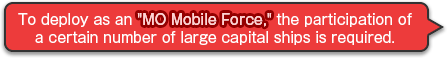
<style>
.page{position:relative;width:448px;height:58px;background:#ed3b3b}
.page>*{position:absolute;margin:0}
.t1{font:14px/18px "GothicMB101Pro-Regular";color:#ffffff}
.t2{font:14px/18px "GothicMB101Pro-Regular";color:#ffd3d3}
</style>
<div class="page">
<p class="t1" style="left:18px;top:13px;width:394px;height:32px;text-align:center">To deploy as an <span class="t2">"MO Mobile Force,"</span> the participation of<br>a certain number of large capital ships is required.</p>
<p class="t1" style="left:18px;top:13px;width:394px;height:32px;text-align:center">To deploy as an <span class="t2">"MO Mobile Force,"</span> the participation of<br>a certain number of large capital ships is required.</p>
</div>
